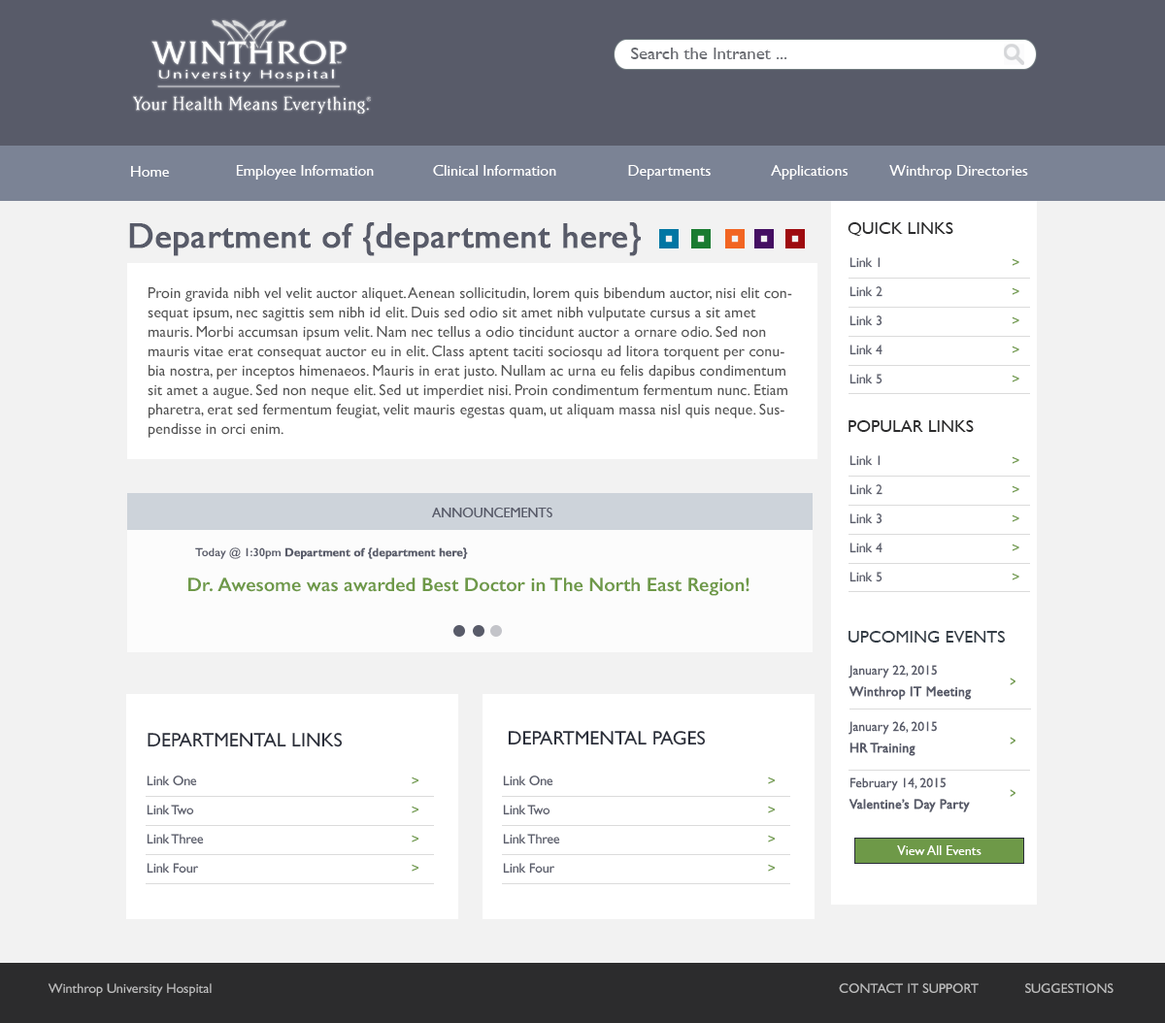
<style>
.page{position:relative;width:1165px;height:1023px;background:#ffffff}
.page>*{position:absolute;margin:0}
.t1{font:17.5px "GillSans";color:#696b71;scale:1.03 1}
.t2{font:15.5px "GillSans";color:#ffffff}
.t3{font:35px "GillSans";color:#585b69;font-weight:bold}
.t4{font:17.5px "GillSans";color:#2c2c2d;text-transform:uppercase}
.t5{font:13.6px/29.1px "GillSans";color:#585b69}
.t6{font:13.6px/29.1px "GillSans";color:#6e9948}
.t7{font:15.5px/19.4px "GillSans";color:#545454}
.t8{font:19.4px/17.5px "GillSans-SemiBold";color:#6e9948}
.t9{font:11.7px/17.5px "GillSans-SemiBold";color:#6e9948}
.t10{font:11.7px/17.5px "GillSans-SemiBold";color:#585b69}
.t11{font:11.7px/17.5px "GillSans-SemiBold";color:#585b69;font-weight:bold}
.t12{font:17.5px "GillSans";color:#343d46;text-transform:uppercase}
.t13{font:13.6px/21.4px "GillSans";color:#585b69;font-weight:bold}
.t14{font:13.6px/21.4px "GillSans";color:#585b69}
.t15{font:13.6px/17.5px "GillSans";color:#585b69}
.t16{font:19.4px "GillSans";color:#292d39;text-transform:uppercase}
.t17{font:23.3px "GillSans";color:#292d39;text-transform:uppercase}
.t18{font:13.6px "GillSans";color:#bebebe;text-transform:uppercase}
.t19{font:13.6px "GillSans";color:#bebebe}
</style>
<div class="page">
<p class="t1" style="left:631px;top:48px;width:156px;height:11px">Search the Intranet ...</p>
<p class="t2" style="left:131px;top:166px;width:38px;height:11px">Home</p>
<p class="t2" style="left:236px;top:165px;width:138px;height:15px">Employee Information</p>
<p class="t2" style="left:433px;top:165px;width:123px;height:11px">Clinical Information</p>
<p class="t2" style="left:628px;top:165px;width:83px;height:15px">Departments</p>
<p class="t2" style="left:771px;top:165px;width:77px;height:15px">Applications</p>
<p class="t2" style="left:889px;top:165px;width:139px;height:15px">Winthrop Directories</p>
<p class="t3" style="left:129px;top:222px;width:512px;height:34px">Department of {department here}</p>
<p class="t4" style="left:848px;top:222px;width:105px;height:14px">QUICK Links</p>
<p class="t5" style="left:850px;top:257px;width:170px;height:128px">Link 1           <span class="t6">&gt;<br></span>Link 2           <span class="t6">&gt;<br></span>Link 3          <span class="t6"> &gt;<br></span>Link 4           <span class="t6">&gt;<br></span>Link 5           <span class="t6">&gt;</span></p>
<p class="t7" style="left:148px;top:287px;width:644px;height:151px">Proin gravida nibh vel velit auctor aliquet. Aenean sollicitudin, lorem quis bibendum auctor, nisi elit consequat ipsum, nec sagittis sem nibh id elit. Duis sed odio sit amet nibh vulputate cursus a sit amet mauris. Morbi accumsan ipsum velit. Nam nec tellus a odio tincidunt auctor a ornare odio. Sed non  mauris vitae erat consequat auctor eu in elit. Class aptent taciti sociosqu ad litora torquent per conubia nostra, per inceptos himenaeos. Mauris in erat justo. Nullam ac urna eu felis dapibus condimentum sit amet a augue. Sed non neque elit. Sed ut imperdiet nisi. Proin condimentum fermentum nunc. Etiam pharetra, erat sed fermentum feugiat, velit mauris egestas quam, ut aliquam massa nisl quis neque. Suspendisse in orci enim.</p>
<p class="t4" style="left:849px;top:420px;width:125px;height:12px">Popular Links</p>
<p class="t5" style="left:850px;top:455px;width:170px;height:128px">Link 1           <span class="t6">&gt;<br></span>Link 2           <span class="t6">&gt;<br></span>Link 3          <span class="t6"> &gt;<br></span>Link 4           <span class="t6">&gt;<br></span>Link 5           <span class="t6">&gt;</span></p>
<p class="t8" style="left:188px;top:548px;width:562px;height:48px"><span class="t9">  </span><span class="t10"> Today @ 1:30pm </span><span class="t11">Department of {department here}<br> <br></span>Dr. Awesome was awarded Best Doctor in The North East Region!</p>
<p class="t12" style="left:849px;top:631px;width:156px;height:12px">Upcoming events</p>
<p class="t13" style="left:849px;top:665px;width:123px;height:148px"><span class="t14">January 22, 2015<br></span>Winthrop IT Meeting<br><br><span class="t15">January 26, 2015<br></span>HR Training<br><br><span class="t15">February 14, 2015<br></span>Valentine’s Day Party</p>
<p class="t16" style="left:148px;top:733px;width:195px;height:15px"><span class="t17"><br></span>dEPARTMENTAL liNKS</p>
<p class="t16" style="left:508px;top:731px;width:198px;height:15px">Departmental Pages</p>
<p class="t6" style="left:147px;top:776px;width:272px;height:98px"><span class="t5">Link One             </span>&gt;<br><span class="t5">Link Two             </span>&gt;<br><span class="t5">Link Three            </span> &gt;<br><span class="t5">Link Four            </span> &gt;           &gt;</p>
<p class="t5" style="left:503px;top:776px;width:273px;height:98px">Link One             <span class="t6">&gt;<br></span>Link Two             <span class="t6">&gt;<br></span>Link Three            <span class="t6"> &gt;<br></span>Link Four             <span class="t6">&gt;</span></p>
<p class="t18" style="left:48px;top:984px;width:1066px;height:13px"><span class="t19"><br>     Winthrop University Hospital                </span>      Contact IT Support    Suggestions</p>
</div>
